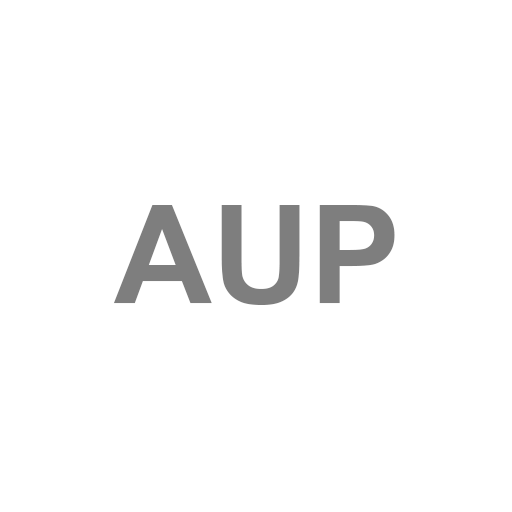
<style>
.page{position:relative;width:512px;height:512px;background:#ffffff}
.page>*{position:absolute;margin:0}
.t1{font:136px "Arial-BoldMT";color:#7e7e7e}
</style>
<div class="page">
<p class="t1" style="left:113px;top:205px;width:282px;height:100px">AUP</p>
</div>
